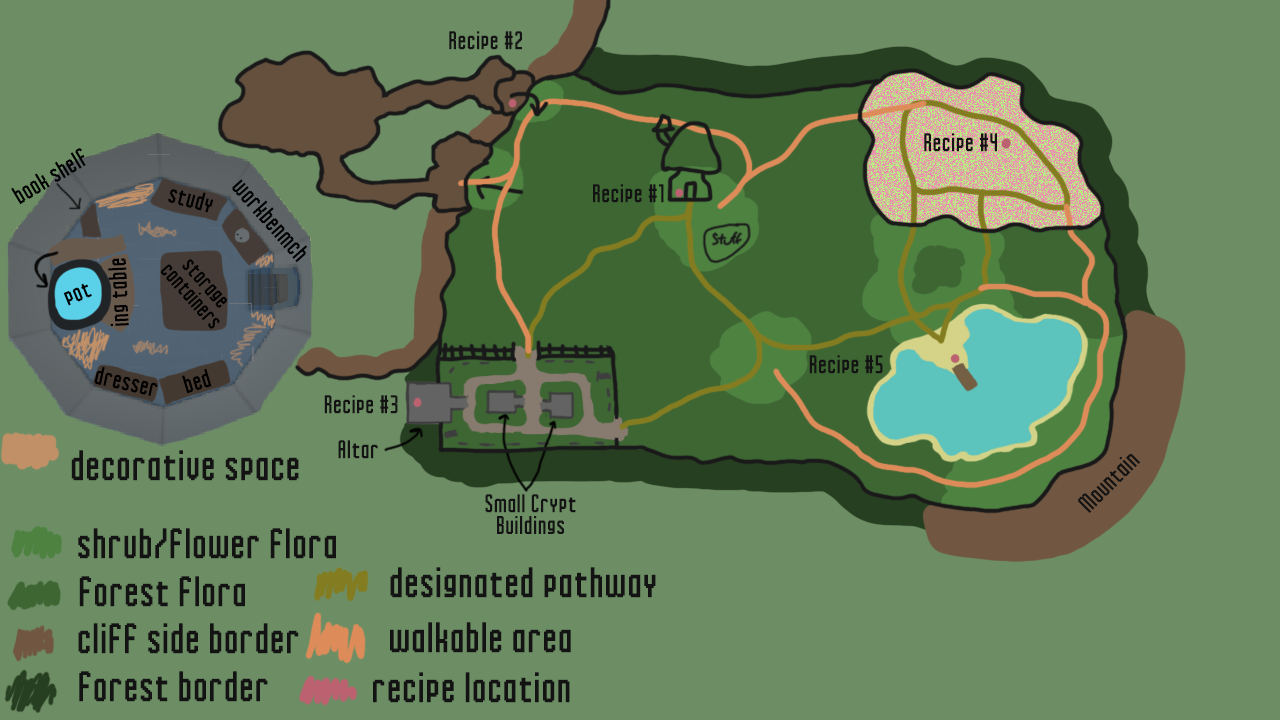
<style>
.page{position:relative;width:1280px;height:720px;background:#6d8e65}
.page>*{position:absolute;margin:0}
.t1{font:18px "Inky-Thin-Pixels";letter-spacing:0.075em;color:#131313}
.t2{font:18px "Inky-Thin-Pixels";letter-spacing:0.075em;color:#000000}
.t3{font:16.3px "Inky-Thin-Pixels";letter-spacing:0.075em;color:#000000}
.t4{font:30px "Inky-Thin-Pixels";letter-spacing:0.075em;color:#131313}
</style>
<div class="page">
<p class="t1" style="left:449px;top:31px;width:73px;height:19px">Recipe #2</p>
<p class="t1" style="left:924px;top:133px;width:73px;height:19px">Recipe #4</p>
<p class="t2" style="left:11px;top:148px;width:75px;height:57px;rotate:-31deg">book shelf</p>
<p class="t2" style="left:232px;top:179px;width:75px;height:84px;rotate:48deg">workbenmch</p>
<p class="t1" style="left:593px;top:184px;width:71px;height:19px">Recipe #1</p>
<p class="t2" style="left:168px;top:189px;width:46px;height:24px;rotate:15deg">study</p>
<p class="t2" style="left:108px;top:258px;width:21px;height:68px;rotate:-93deg">ing table</p>
<p class="t3" style="left:160px;top:259px;width:68px;height:70px;text-align:center;rotate:48deg">storage<br>containers</p>
<p class="t2" style="left:63px;top:283px;width:29px;height:23px;rotate:-22deg">pot</p>
<p class="t1" style="left:809px;top:355px;width:74px;height:19px">Recipe #5</p>
<p class="t2" style="left:94px;top:367px;width:64px;height:29px;rotate:12deg">dresser</p>
<p class="t2" style="left:182px;top:368px;width:30px;height:26px;rotate:-17deg">bed</p>
<p class="t1" style="left:324px;top:395px;width:74px;height:19px">Recipe #3</p>
<p class="t1" style="left:338px;top:440px;width:40px;height:19px">Altar</p>
<p class="t4" style="left:71px;top:450px;width:228px;height:31px">decorative space</p>
<p class="t1" style="left:1077px;top:453px;width:64px;height:60px;rotate:-45deg">Mountain</p>
<p class="t1" style="left:485px;top:494px;width:91px;height:40px;text-align:center">Small Crypt<br>Buildings</p>
<p class="t4" style="left:78px;top:528px;width:258px;height:31px">shrub/flower flora</p>
<p class="t4" style="left:390px;top:567px;width:266px;height:31px">designated pathway</p>
<p class="t4" style="left:79px;top:576px;width:166px;height:31px">forest flora</p>
<p class="t4" style="left:78px;top:623px;width:221px;height:31px">cliff side border</p>
<p class="t4" style="left:390px;top:622px;width:181px;height:31px">walkable area</p>
<p class="t4" style="left:79px;top:671px;width:189px;height:31px">forest border</p>
<p class="t4" style="left:373px;top:672px;width:197px;height:31px">recipe location</p>
</div>
